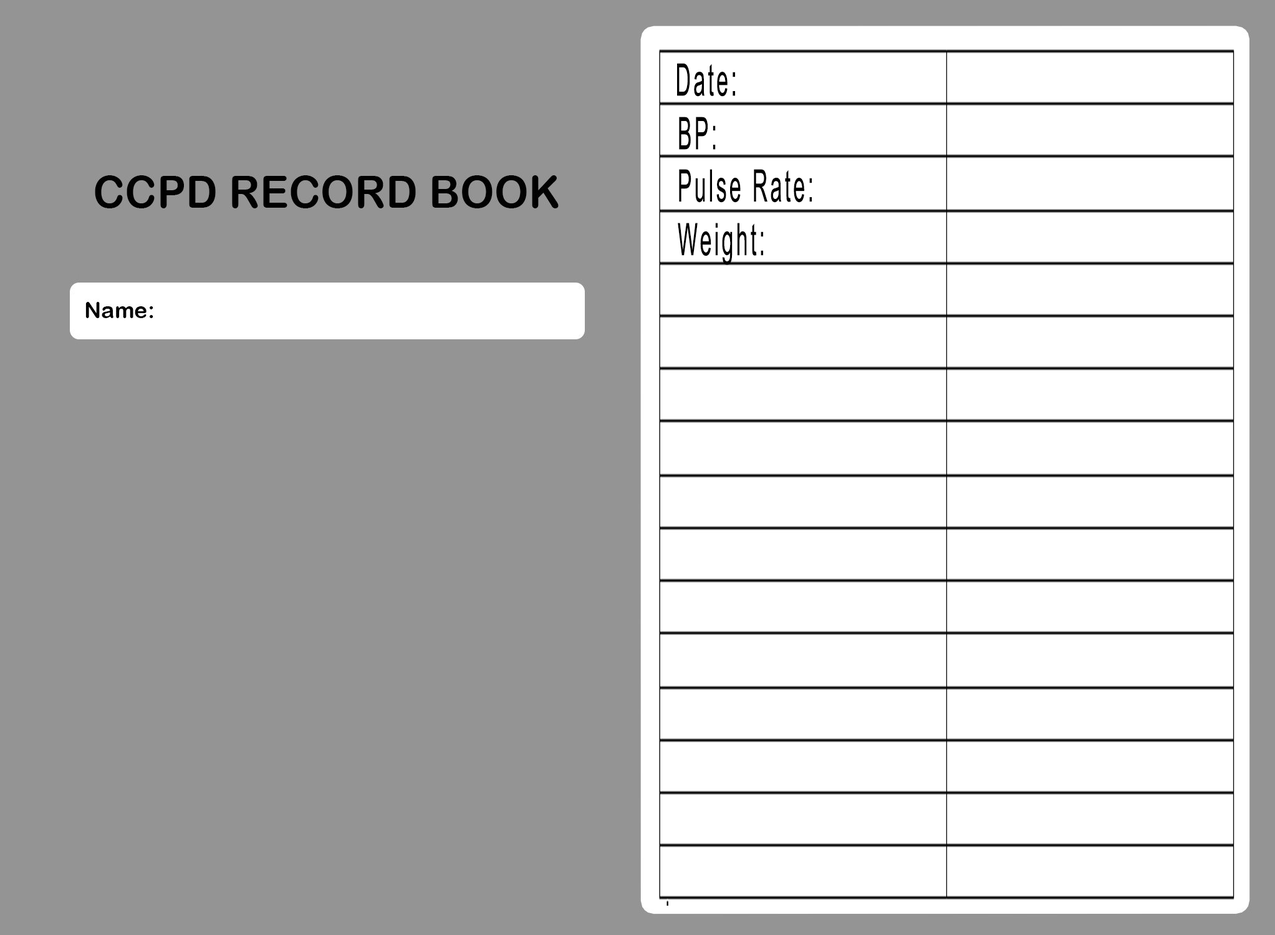
<style>
.page{position:relative;width:1275px;height:935px;background:#949494}
.page>*{position:absolute;margin:0}
.t1{font:44.9px "ArialNarrow";letter-spacing:0.1em;color:#000000;scale:0.58 1}
</style>
<div class="page">
<p class="t1" style="left:677px;top:63px;width:58px;height:34px">Date:</p>
<p class="t1" style="left:679px;top:117px;width:37px;height:33px">BP:</p>
<p class="t1" style="left:679px;top:169px;width:133px;height:34px">Pulse Rate:</p>
<p class="t1" style="left:678px;top:223px;width:85px;height:42px">Weight:</p>
</div>
